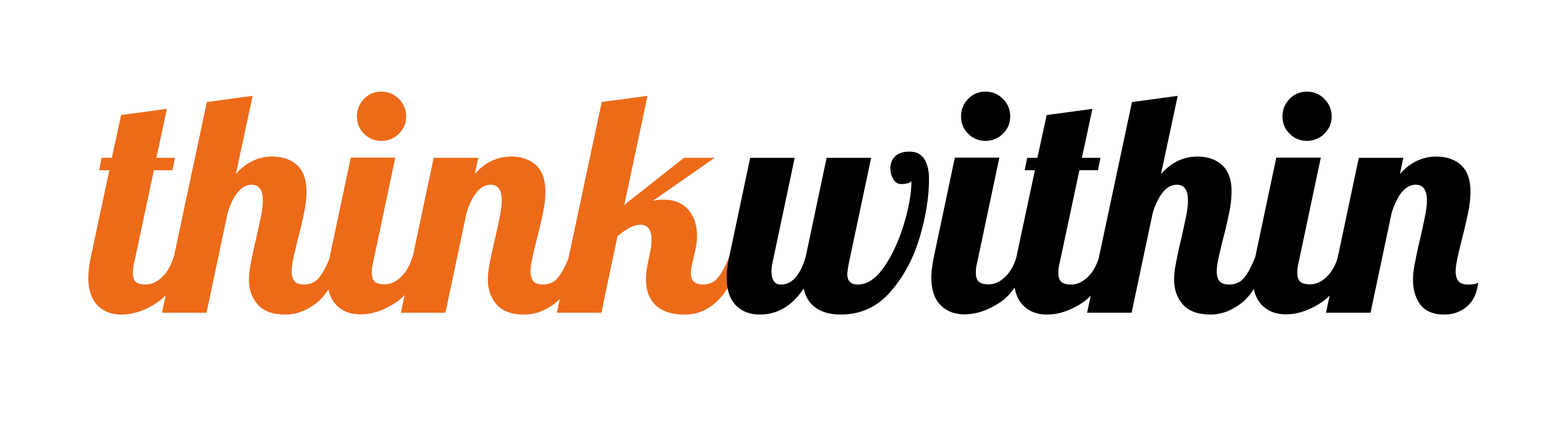
<style>
.page{position:relative;width:1568px;height:423px;background:#ffffff}
.page>*{position:absolute;margin:0}
.t1{font:309.5px "Lobster-Regular";color:#000000}
.t2{font:309.5px "Lobster-Regular";color:#ed6b18}
</style>
<div class="page">
<p class="t1" style="left:88px;top:91px;width:1390px;height:223px"><span class="t2">think</span>within</p>
</div>
